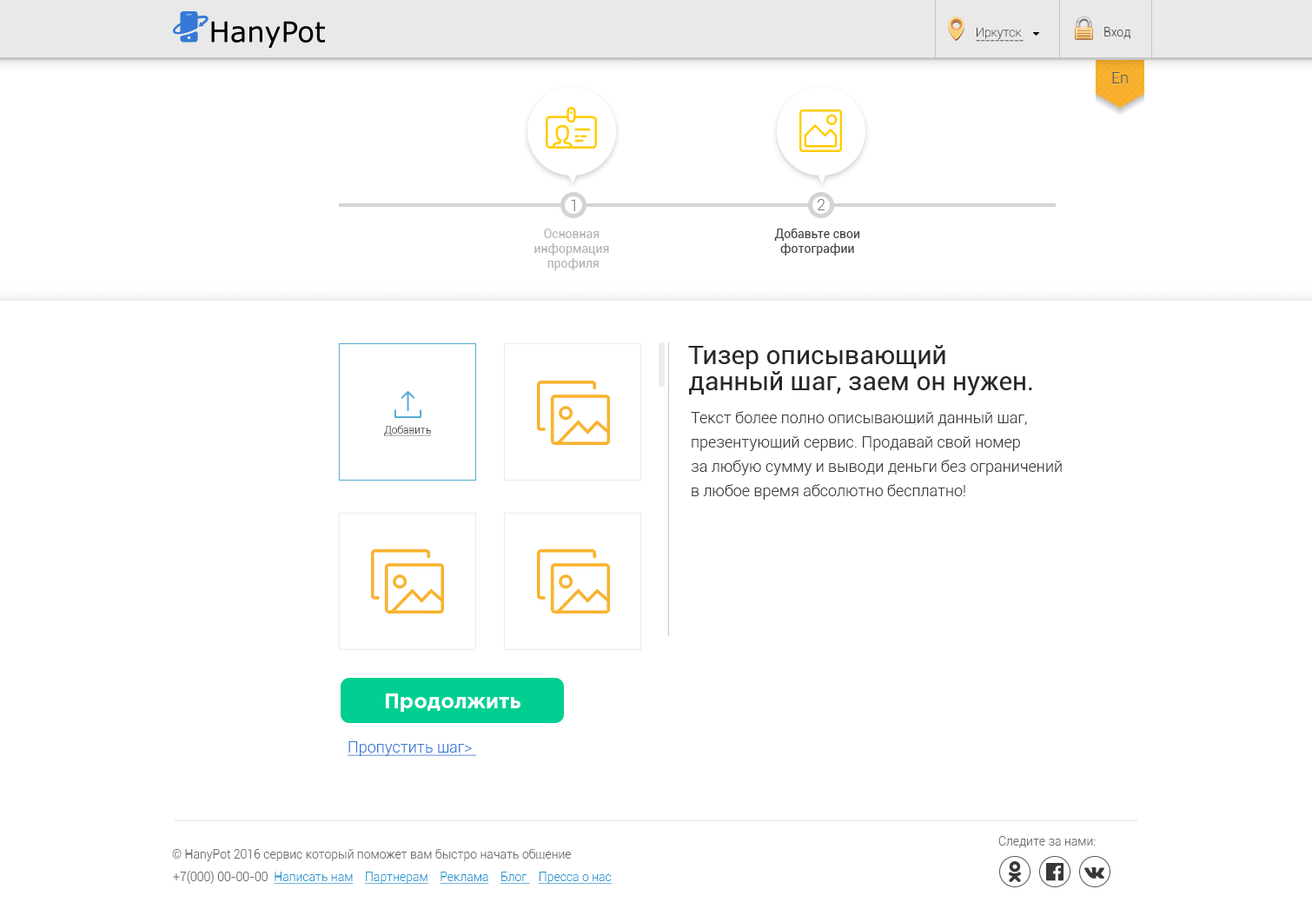
<style>
.page{position:relative;width:1312px;height:909px;background:#ffffff}
.page>*{position:absolute;margin:0}
.t1{font:12.2px/7.8px "Roboto-Thin";color:#393939}
.t2{font:12.2px "Roboto-Light";color:#525252}
.t3{font:15.6px "Roboto-Light";color:#525252}
.t4{font:15.6px "Roboto-Light";color:#7e7e7e}
.t5{font:12.2px "Roboto-Regular";color:#b3b3b3}
.t6{font:12.2px "Roboto-Regular";color:#464646}
.t7{font:26.1px/26.1px "Roboto-Regular";color:#282828}
.t8{font:15.6px/24.3px "Roboto-Light";color:#393939}
.t9{font:10.4px "Roboto-Light";color:#393939;text-decoration:underline}
.t10{font:20.9px "GothamPro-Bold";color:#ffffff}
.t11{font:15.6px "Roboto-Light";color:#3678d7;text-decoration:underline}
.t12{font:12.2px "Roboto-Light";color:#696969}
.t13{font:12.2px "Roboto-Light";color:#2196d1;text-decoration:underline}
</style>
<div class="page">
<p class="t1" style="left:976px;top:27px;width:48px;height:15px">Иркутск<br>----------</p>
<p class="t2" style="left:1104px;top:27px;width:26px;height:12px">Вход</p>
<p class="t3" style="left:1112px;top:72px;width:16px;height:11px">En</p>
<p class="t4" style="left:571px;top:199px;width:4px;height:12px">1</p>
<p class="t4" style="left:818px;top:199px;width:7px;height:11px">2</p>
<p class="t5" style="left:534px;top:229px;width:75px;height:41px;text-align:center">Основная <br>информация <br>профиля</p>
<p class="t6" style="left:774px;top:229px;width:86px;height:26px;text-align:center">Добавьте свои<br>фотографии</p>
<p class="t7" style="left:688px;top:345px;width:344px;height:50px">Тизер описывающий<br>данный шаг, заем он нужен.</p>
<p class="t8" style="left:691px;top:411px;width:371px;height:89px">Текст более полно описывающий данный шаг, <br>презентующий сервис. Продавай свой номер <br>за любую сумму и выводи деньги без ограничений <br>в любое время абсолютно бесплатно!</p>
<p class="t9" style="left:384px;top:425px;width:48px;height:11px">Добавить</p>
<p class="t10" style="left:386px;top:693px;width:134px;height:19px">Продолжить</p>
<p class="t11" style="left:348px;top:741px;width:129px;height:15px">Пропустить шаг&gt;</p>
<p class="t12" style="left:998px;top:836px;width:98px;height:12px">Следите за нами:</p>
<p class="t12" style="left:172px;top:849px;width:399px;height:12px">© HanyPot 2016 сервис который поможет вам быстро начать общение</p>
<p class="t13" style="left:173px;top:871px;width:439px;height:13px"><span class="t12">+7(000) 00-00-00  </span>Написать нам    Партнерам    Реклама    Блог    Пресса о нас</p>
</div>
